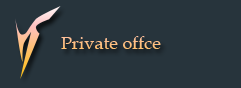
<style>
.page{position:relative;width:241px;height:88px;background:#27343c}
.page>*{position:absolute;margin:0}
.t1{font:18px "BookAntiqua";color:#ffc080}
</style>
<div class="page">
<p class="t1" style="left:61px;top:36px;width:100px;height:13px">Private offce</p>
</div>
